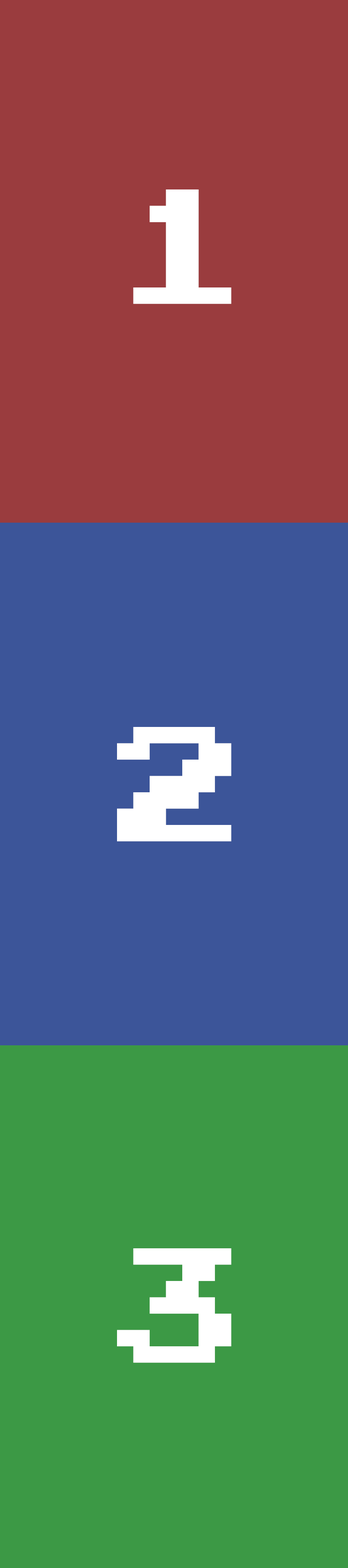
<style>
.page{position:relative;width:348px;height:1568px;background:#3c5599}
.page>*{position:absolute;margin:0}
.t1{font:130.7px "PressStart2P-Regular";letter-spacing:-0.075em;color:#ffffff}
</style>
<div class="page">
<p class="t1" style="left:133px;top:189px;width:99px;height:115px">1</p>
<p class="t1" style="left:117px;top:727px;width:115px;height:114px">2</p>
<p class="t1" style="left:117px;top:1248px;width:115px;height:115px">3</p>
</div>
